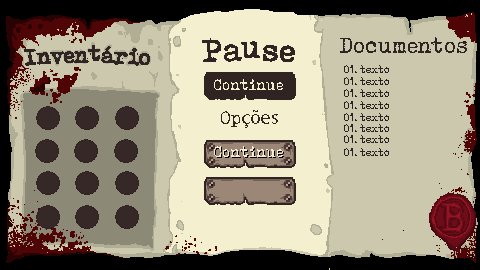
<style>
.page{position:relative;width:480px;height:270px;background:#ccc8ad}
.page>*{position:absolute;margin:0}
.t1{font:34.9px "ToxTypewriter";color:#302423}
.t2{font:24.7px "ToxTypewriter";color:#302423}
.t3{font:12px "ToxTypewriter";color:#2c2221}
.t4{font:17.1px "ToxTypewriter";color:#f4efcf}
.t5{font:20.3px "MyriadPro-Regular";color:#302423}
.t6{font:20.3px "ToxTypewriter";color:#302423}
.t7{font:17.1px "ToxTypewriter";color:#010101}
.t8{font:44.6px "ToxTypewriter"}
</style>
<div class="page">
<p class="t1" style="left:202px;top:38px;width:93px;height:24px">Pause</p>
<p class="t2" style="left:340px;top:37px;width:127px;height:16px">Documentos</p>
<p class="t2" style="left:24px;top:45px;width:126px;height:21px">Inventário</p>
<p class="t3" style="left:344px;top:65px;width:45px;height:8px">01. texto</p>
<p class="t3" style="left:344px;top:77px;width:45px;height:8px">01. texto</p>
<p class="t4" style="left:214px;top:79px;width:69px;height:11px">Continue</p>
<p class="t3" style="left:344px;top:89px;width:45px;height:8px">01. texto</p>
<p class="t3" style="left:344px;top:101px;width:45px;height:8px">01. texto</p>
<p class="t5" style="left:221px;top:110px;width:57px;height:18px"><span class="t6">Op</span>ções</p>
<p class="t3" style="left:344px;top:113px;width:45px;height:8px">01. texto</p>
<p class="t3" style="left:344px;top:124px;width:45px;height:8px">01. texto</p>
<p class="t3" style="left:344px;top:135px;width:45px;height:8px">01. texto</p>
<p class="t4" style="left:214px;top:146px;width:69px;height:11px">Continue</p>
<p class="t7" style="left:215px;top:147px;width:69px;height:11px">Continue</p>
<p class="t3" style="left:344px;top:148px;width:45px;height:8px">01. texto</p>
<p class="t8" style="left:441px;top:203px;width:23px;height:29px">B</p>
</div>
